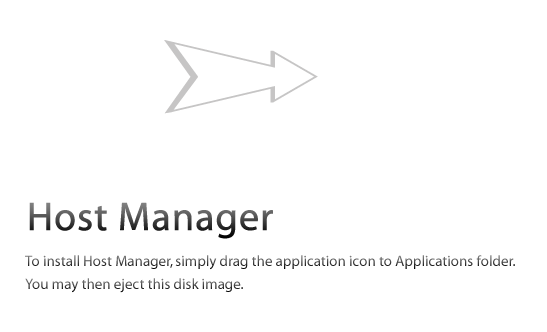
<style>
.page{position:relative;width:547px;height:332px;background:#ffffff}
.page>*{position:absolute;margin:0}
.t1{font:40px "Myriad-Roman";font-weight:bold}
.t2{font:15px "Myriad-Roman"}
</style>
<div class="page">
<p class="t1" style="left:29px;top:202px;width:244px;height:37px">Host Manager</p>
<p class="t2" style="left:25px;top:255px;width:490px;height:15px">To install Host Manager, simply drag the application icon to Applications folder.</p>
<p class="t2" style="left:25px;top:278px;width:218px;height:15px">You may then eject this disk image.</p>
</div>
